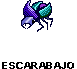
<style>
.page{position:relative;width:77px;height:69px;background:#ffffff}
.page>*{position:absolute;margin:0}
.t1{font:10.3px "Arial-BoldMT";color:#000000;scale:1.11 1}
</style>
<div class="page">
<p class="t1" style="left:2px;top:62px;width:72px;height:7px">ESCARABAJO</p>
</div>
